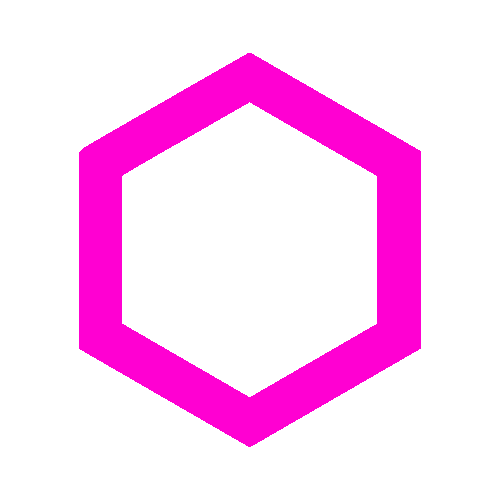
<style>
.page{position:relative;width:500px;height:500px;background:#ffffff}
.page>*{position:absolute;margin:0}
.t1{font:600px "AppleSymbols";color:#ff00d2;font-weight:bold}
</style>
<div class="page">
<p class="t1" style="left:79px;top:53px;width:342px;height:394px">⬡</p>
</div>
